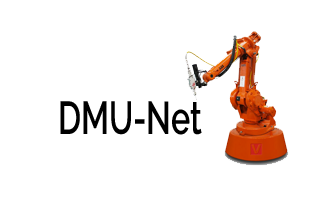
<style>
.page{position:relative;width:316px;height:210px;background:#ffffff}
.page>*{position:absolute;margin:0}
.t1{font:46px "Raleway-SemiBold";color:#000000;scale:0.7 1}
</style>
<div class="page">
<p class="t1" style="left:60px;top:101px;width:142px;height:34px">DMU-Net</p>
</div>
